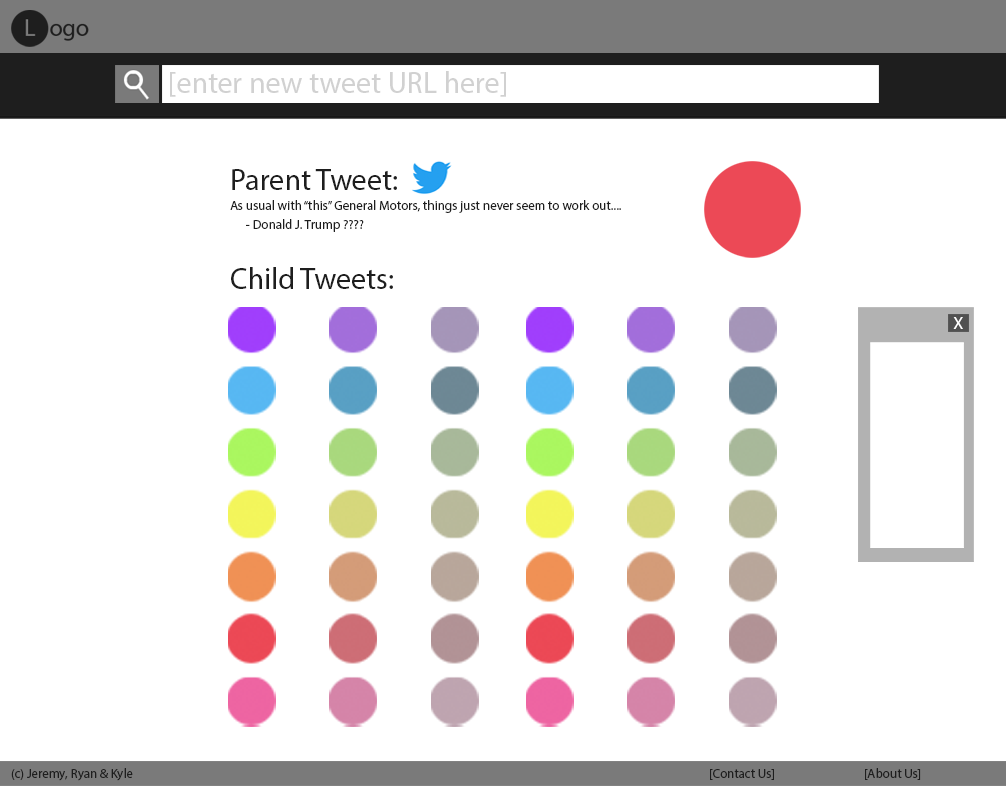
<style>
.page{position:relative;width:1006px;height:786px;background:#ffffff}
.page>*{position:absolute;margin:0}
.t1{font:30px "MyriadPro-Regular";color:#d1d1d1}
.t2{font:30.1px "MyriadPro-Regular";color:#1e1e1e}
.t3{font:13.1px "MyriadPro-Regular";color:#1e1e1e}
.t4{font:13px "MyriadPro-Regular";color:#1e1e1e}
.t5{font:17.4px "MyriadPro-Regular";color:#ffffff}
.t6{font:13px "MyriadPro-Regular"}
</style>
<div class="page">
<p class="t1" style="left:170px;top:71px;width:336px;height:26px">[enter new tweet URL here]</p>
<p class="t2" style="left:232px;top:169px;width:165px;height:21px">Parent Tweet:</p>
<p class="t3" style="left:230px;top:200px;width:391px;height:13px">As usual with “this” General Motors, things just never seem to work out....</p>
<p class="t4" style="left:246px;top:219px;width:118px;height:13px">- Donald J. Trump ????</p>
<p class="t2" style="left:231px;top:267px;width:162px;height:22px">Child Tweets:</p>
<p class="t5" style="left:953px;top:317px;width:10px;height:12px">X</p>
<p class="t6" style="left:11px;top:768px;width:201px;height:13px">(c) Jeremy, Ryan &amp; Kyle made this shit</p>
<p class="t4" style="left:710px;top:769px;width:64px;height:11px">[Contact Us]</p>
<p class="t4" style="left:865px;top:768px;width:56px;height:12px">[About Us]</p>
</div>
